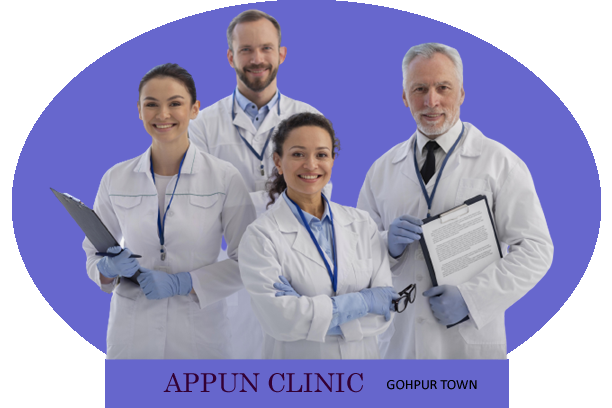
<style>
.page{position:relative;width:612px;height:408px;background:#6767cd}
.page>*{position:absolute;margin:0}
.t1{font:26px "Century";color:#330033}
.t2{font:26px "ArialMT";color:#cc66cc}
.t3{font:14px "Calibri";color:#000000}
</style>
<div class="page">
<p class="t1" style="left:163px;top:373px;width:200px;height:20px"><span class="t2"><br></span>APPUN CLINIC</p>
<p class="t3" style="left:387px;top:380px;width:90px;height:10px">GOHPUR TOWN</p>
</div>
